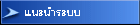
<style>
.page{position:relative;width:140px;height:25px}
.page>*{position:absolute;margin:0}
.t1{font:15.3px "EucrosiaDSE";color:#ffffff;scale:1.12 1}
</style>
<div class="page">
<p class="t1" style="left:25px;top:7px;width:55px;height:9px">á¹Ð¹ÓÃÐºº</p>
</div>
